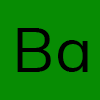
<style>
.page{position:relative;width:100px;height:100px;background:#078c03}
.page>*{position:absolute;margin:0}
.t1{font:62.5px "Muli-Regular";color:#000000}
</style>
<div class="page">
<p class="t1" style="left:17px;top:28px;width:71px;height:44px">Ba</p>
</div>
